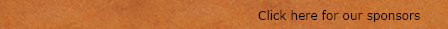
<style>
.page{position:relative;width:448px;height:29px}
.page>*{position:absolute;margin:0}
.t1{font:12px "Verdana";color:#000000}
</style>
<div class="page">
<p class="t1" style="left:258px;top:10px;width:162px;height:12px">Click here for our sponsors</p>
</div>
